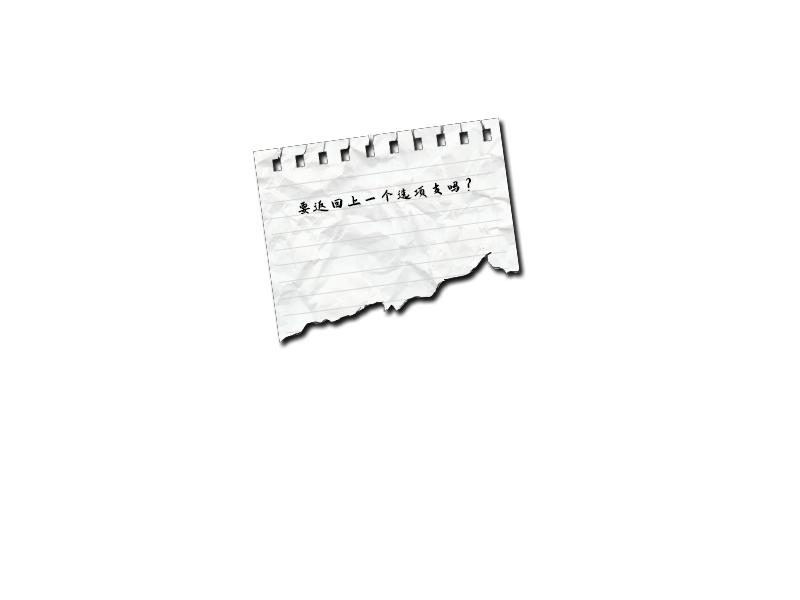
<style>
.page{position:relative;width:800px;height:600px;background:#ffffff}
.page>*{position:absolute;margin:0}
.t1{font:18.8px "slideyouran-Regular";color:#000000}
</style>
<div class="page">
<p class="t1" style="left:298px;top:177px;width:173px;height:37px;rotate:-8deg">要返回上一个选项支吗?</p>
</div>
